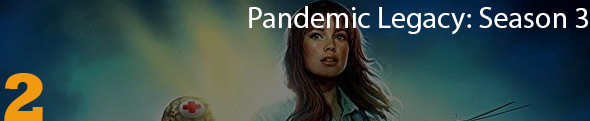
<style>
.page{position:relative;width:590px;height:121px}
.page>*{position:absolute;margin:0}
.t1{font:30px "MyriadPro-Regular";color:#ffffff}
.t2{font:70px "Rockwell-ExtraBold";color:#f09911}
</style>
<div class="page">
<p class="t1" style="left:249px;top:6px;width:339px;height:29px">Pandemic Legacy: Season 3</p>
<p class="t2" style="left:4px;top:73px;width:39px;height:49px">2</p>
</div>
